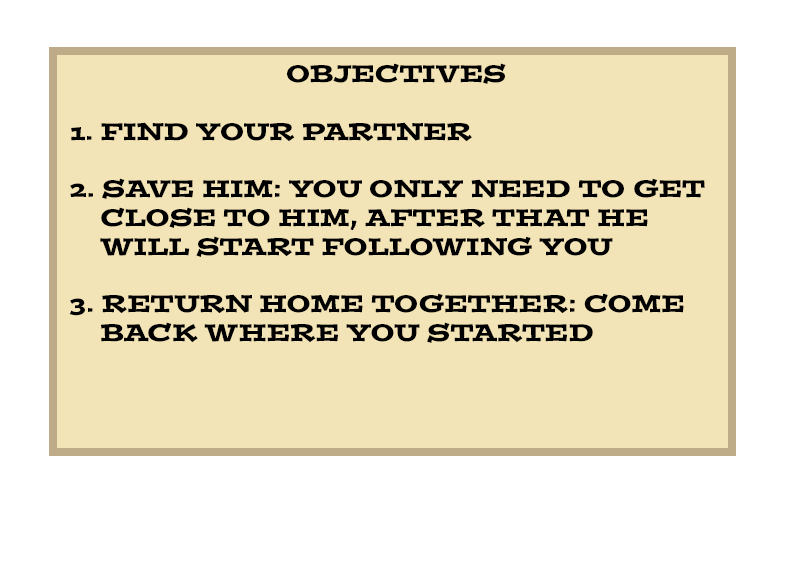
<style>
.page{position:relative;width:792px;height:568px;background:#f3e4b7}
.page>*{position:absolute;margin:0}
.t1{font:24px "PostinoStd";color:#000000}
</style>
<div class="page">
<p class="t1" style="left:69px;top:63px;width:636px;height:280px">OBJECTIVES<br><br>1. FIND YOUR PARTNER<br><br>2. SAVE HIM: YOU ONLY NEED TO GET<br>    CLOSE TO HIM, AFTER THAT HE <br>    WILL START FOLLOWING YOU<br><br>3. RETURN HOME TOGETHER: COME <br>    BACK WHERE YOU STARTED</p>
</div>
